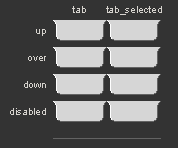
<style>
.page{position:relative;width:178px;height:148px;background:#333333}
.page>*{position:absolute;margin:0}
.t1{font:10px "ArialMT";color:#d6d3ce}
.t2{font:10px/27px "ArialMT";color:#d6d3ce}
</style>
<div class="page">
<p class="t1" style="left:72px;top:6px;width:90px;height:9px">tab       tab_selected</p>
<p class="t2" style="left:10px;top:29px;width:36px;height:86px;text-align:right"><span class="t1">up<br></span>over<br>down<br>disab<span class="t1">led</span></p>
</div>
